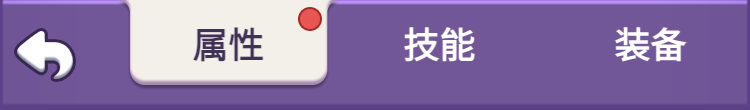
<style>
.page{position:relative;width:750px;height:110px;background:#715798}
.page>*{position:absolute;margin:0}
.t1{font:36px/36px "WebPSD-18463539-0-Regular";color:#3f3254;font-weight:bold}
.t2{font:36px/36px "WebPSD-18463539-0-Regular";color:#ffffff;font-weight:bold}
</style>
<div class="page">
<p class="t1" style="left:116px;top:0px;width:225px;height:90px;text-align:center">属性</p>
<p class="t2" style="left:327px;top:0px;width:225px;height:90px;text-align:center">技能</p>
</div>
